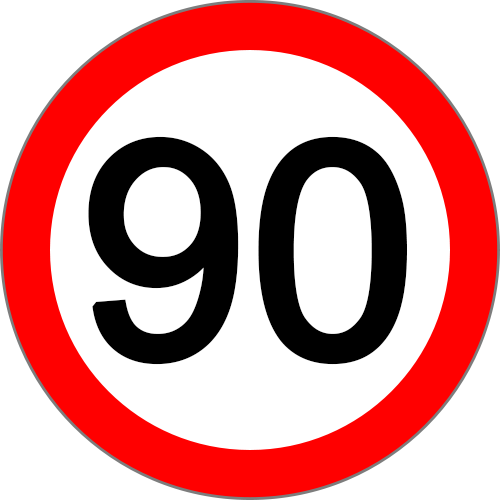
<style>
.page{position:relative;width:500px;height:500px;background:#ffffff}
.page>*{position:absolute;margin:0}
.t1{font:301px "ArialMT";letter-spacing:-0.02em;color:#000000;font-weight:bold}
</style>
<div class="page">
<p class="t1" style="left:88px;top:136px;width:320px;height:229px">90</p>
</div>
